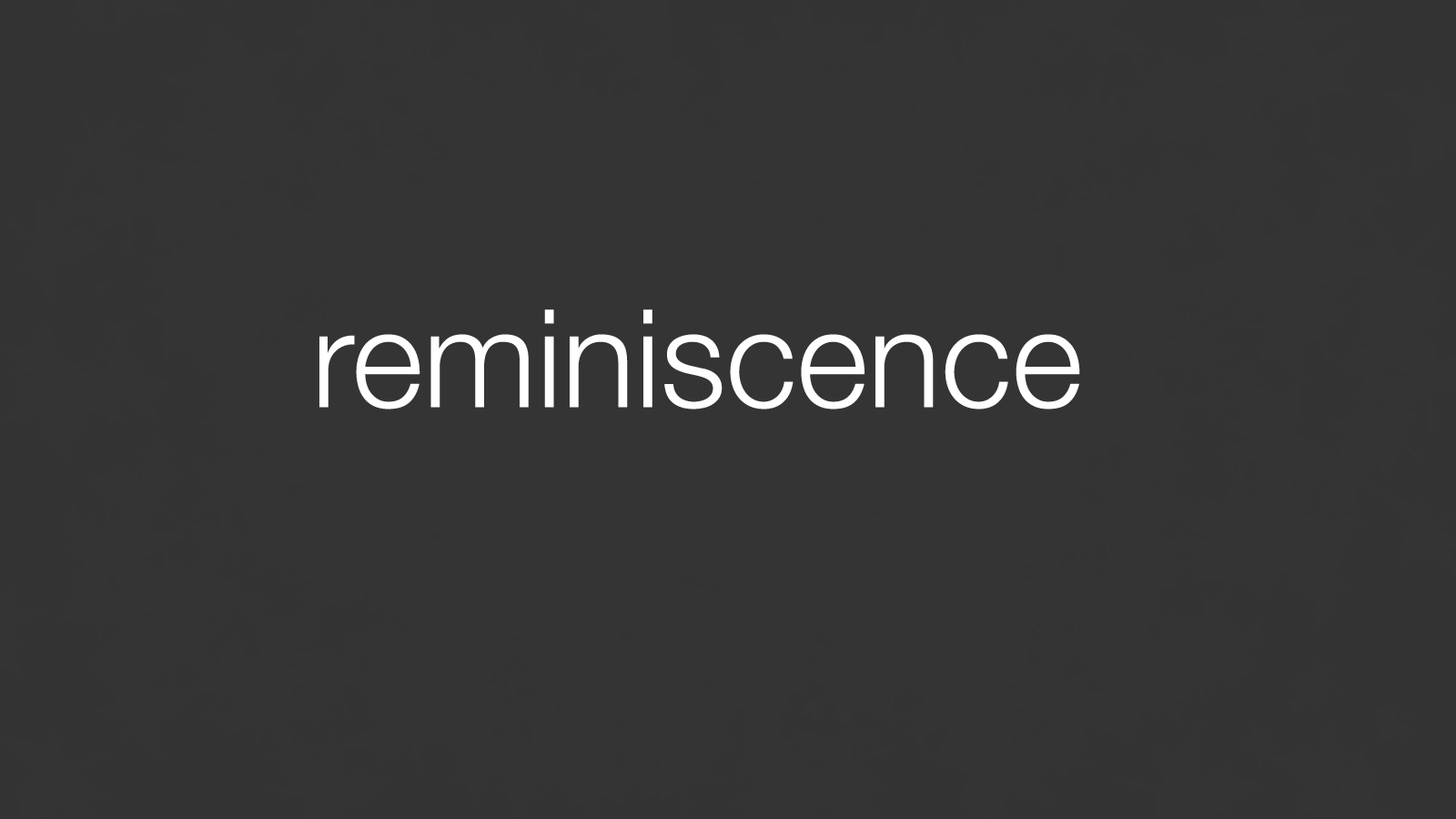
<style>
.page{position:relative;width:1456px;height:819px;background:#343435}
.page>*{position:absolute;margin:0}
.t1{font:136.5px "HelveticaNeue-Light";color:#ffffff}
</style>
<div class="page">
<p class="t1" style="left:319px;top:309px;width:761px;height:100px">reminiscence</p>
</div>
